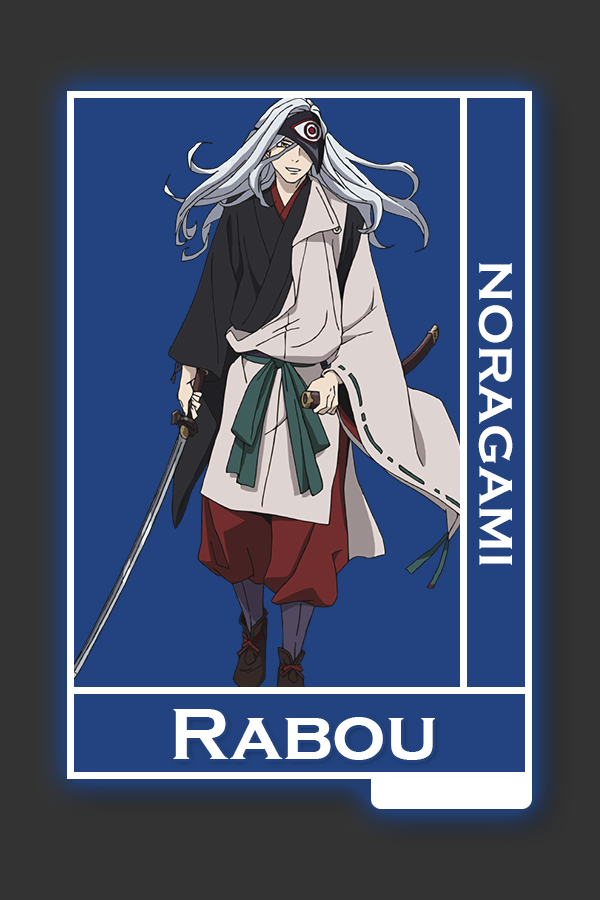
<style>
.page{position:relative;width:600px;height:900px;background:#22437f}
.page>*{position:absolute;margin:0}
.t1{font:48.8px "CopperplateGothic-Bold";color:#ffffff}
.t2{font:75px "CopperplateGothic-Bold";color:#ffffff}
</style>
<div class="page">
<p class="t1" style="left:478px;top:263px;width:35px;height:302px;rotate:90deg">NORAGAMI</p>
<p class="t2" style="left:173px;top:709px;width:262px;height:51px">Rabou</p>
</div>
